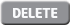
<style>
.page{position:relative;width:70px;height:25px;background:#919296}
.page>*{position:absolute;margin:0}
.t1{font:11px "HeadlineR-HM";letter-spacing:-0.02em;color:#f9fafc}
</style>
<div class="page">
<p class="t1" style="left:13px;top:8px;width:45px;height:10px">DELETE</p>
</div>
